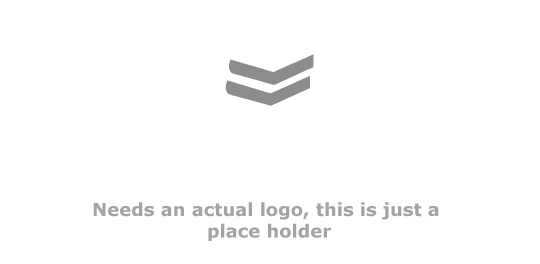
<style>
.page{position:relative;width:540px;height:264px;background:#ffffff}
.page>*{position:absolute;margin:0}
.t1{font:18px "Verdana-Bold";color:#a3a3a3}
</style>
<div class="page">
<p class="t1" style="left:93px;top:202px;width:346px;height:39px;text-align:center">Needs an actual logo, this is just a<br> place holder</p>
</div>
